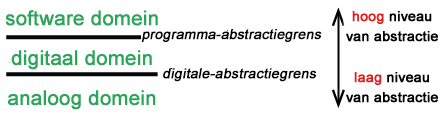
<style>
.page{position:relative;width:442px;height:120px;background:#ffffff}
.page>*{position:absolute;margin:0}
.t1{font:13.9px/19.9px "ArialMT";color:#000000;font-weight:bold}
.t2{font:13.9px/19.9px "ArialMT";color:#df1c1c;font-weight:bold}
.t3{font:13.9px "ArialMT";color:#000000;font-weight:bold;font-style:italic}
</style>
<div class="page">
<p class="t1" style="left:346px;top:11px;width:92px;height:31px;text-align:center"><span class="t2">hoog</span> niveau<br>van abstractie</p>
<p class="t3" style="left:141px;top:29px;width:181px;height:13px">programma-abstractiegrens</p>
<p class="t3" style="left:163px;top:68px;width:153px;height:14px">digitale-abstractiegrens</p>
<p class="t1" style="left:346px;top:72px;width:92px;height:31px;text-align:center"><span class="t2">laag</span> niveau<br>van abstractie</p>
</div>
